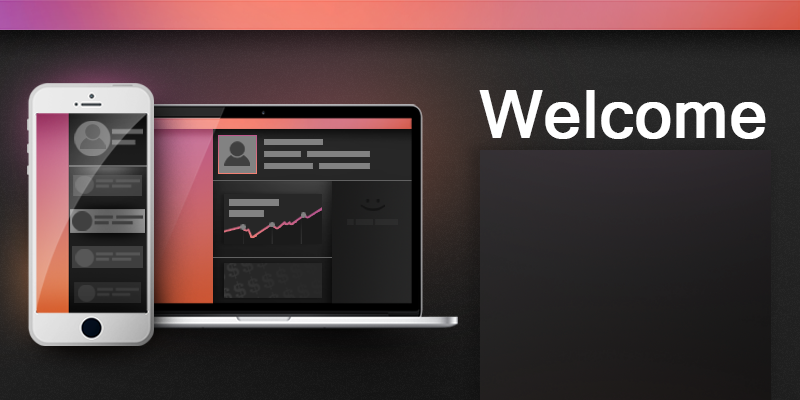
<style>
.page{position:relative;width:800px;height:400px}
.page>*{position:absolute;margin:0}
.t1{font:66.3px "MicrosoftSansSerif";color:#ffffff;font-weight:bold}
</style>
<div class="page">
<p class="t1" style="left:479px;top:90px;width:287px;height:49px">Welcome</p>
</div>
